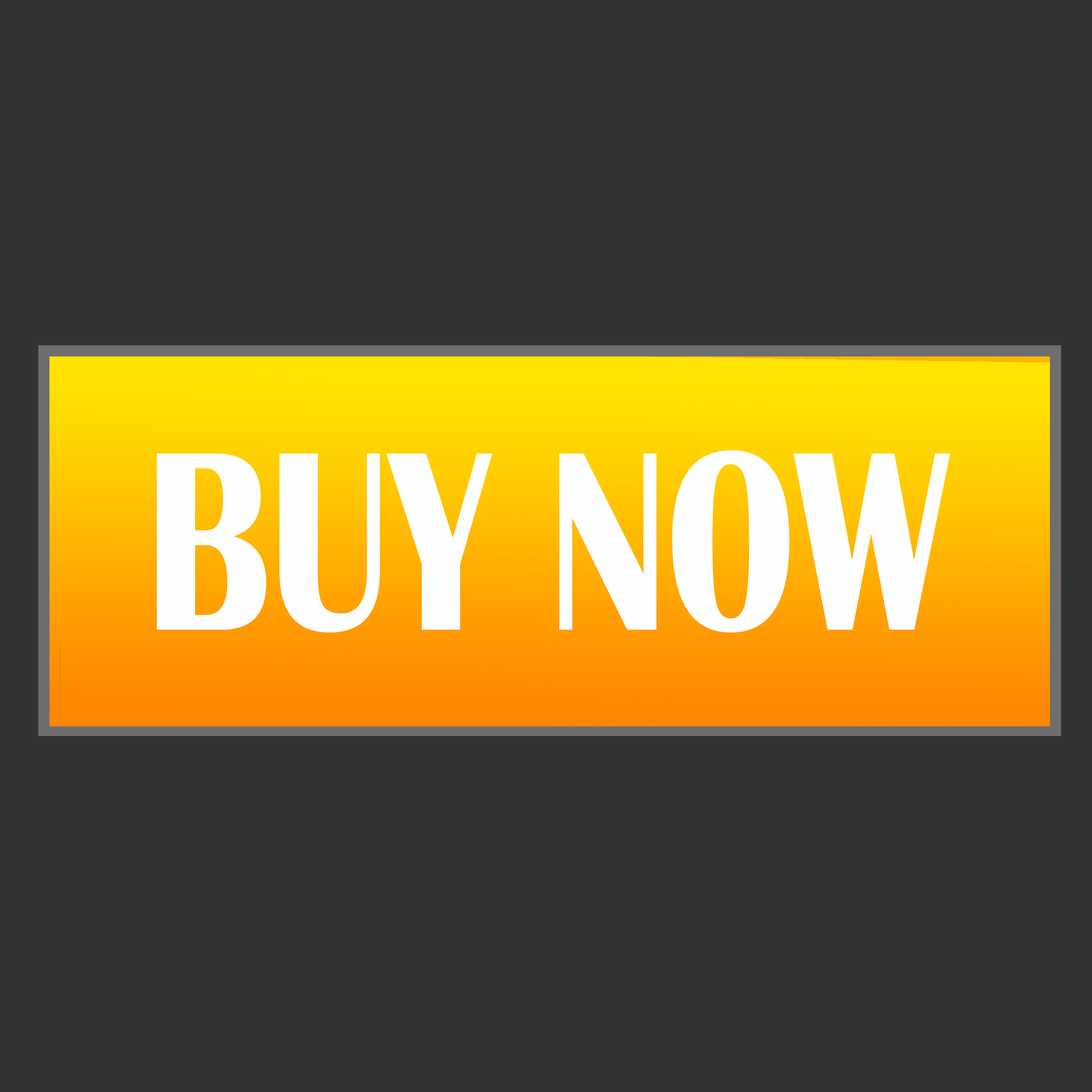
<style>
.page{position:relative;width:1092px;height:1092px;background:#333333}
.page>*{position:absolute;margin:0}
.t1{font:264.5px "BritannicBold";color:#fdfefe;scale:0.75 1}
</style>
<div class="page">
<p class="t1" style="left:157px;top:450px;width:794px;height:182px">BUY NOW</p>
</div>
